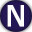
<style>
.page{position:relative;width:32px;height:32px;background:#251755}
.page>*{position:absolute;margin:0}
.t1{font:28.5px "Verdana";letter-spacing:0.05em;color:#ffffff;font-weight:bold}
</style>
<div class="page">
<p class="t1" style="left:7px;top:5px;width:17px;height:22px">N</p>
</div>
